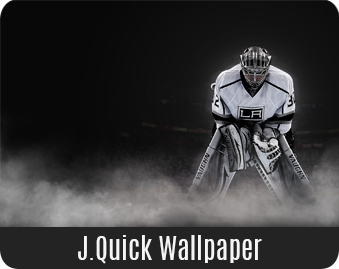
<style>
.page{position:relative;width:339px;height:269px}
.page>*{position:absolute;margin:0}
.t1{font:27.8px "Antonio-Regular";color:#f5f5f5}
</style>
<div class="page">
<p class="t1" style="left:78px;top:235px;width:184px;height:29px">J.Quick Wallpaper</p>
</div>
